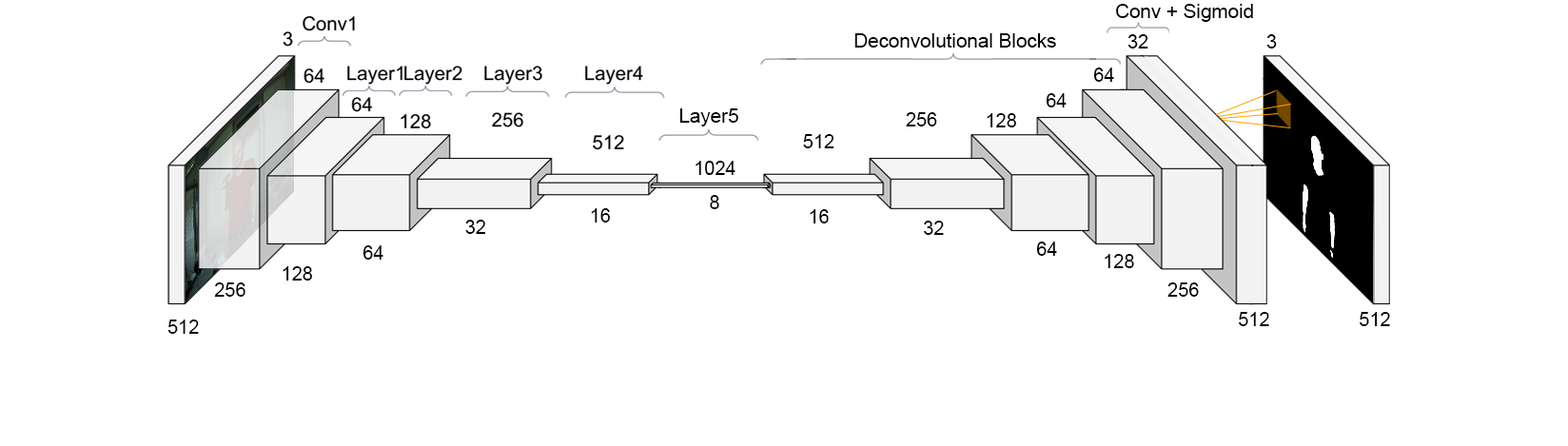
<style>
.page{position:relative;width:1568px;height:446px;background:#ffffff}
.page>*{position:absolute;margin:0}
.t1{font:19.4px "ArialMT";color:#000000}
.t2{font:19px "ArialMT";color:#000000}
.t3{font:19.3px "ArialMT";color:#000000}
.t4{font:19.1px "ArialMT";color:#000000}
</style>
<div class="page">
<p class="t1" style="left:1116px;top:4px;width:137px;height:18px">Conv + Sigmoid</p>
<p class="t1" style="left:854px;top:33px;width:202px;height:15px">Deconvolutional Blocks</p>
<p class="t2" style="left:1127px;top:34px;width:21px;height:15px">32</p>
<p class="t3" style="left:1266px;top:34px;width:11px;height:15px">3</p>
<p class="t4" style="left:1093px;top:68px;width:21px;height:14px">64</p>
<p class="t1" style="left:1046px;top:93px;width:21px;height:15px">64</p>
<p class="t3" style="left:679px;top:108px;width:59px;height:19px">Layer5</p>
<p class="t1" style="left:906px;top:112px;width:31px;height:15px">256</p>
<p class="t1" style="left:987px;top:113px;width:29px;height:14px">128</p>
<p class="t2" style="left:803px;top:134px;width:31px;height:14px">512</p>
<p class="t2" style="left:696px;top:161px;width:39px;height:14px">1024</p>
<p class="t2" style="left:710px;top:195px;width:9px;height:14px">8</p>
<p class="t2" style="left:591px;top:208px;width:19px;height:15px">16</p>
<p class="t4" style="left:810px;top:209px;width:19px;height:15px">16</p>
<p class="t2" style="left:465px;top:220px;width:20px;height:14px">32</p>
<p class="t4" style="left:924px;top:221px;width:20px;height:14px">32</p>
<p class="t2" style="left:363px;top:245px;width:20px;height:15px">64</p>
<p class="t4" style="left:1036px;top:242px;width:21px;height:14px">64</p>
<p class="t4" style="left:1105px;top:254px;width:29px;height:14px">128</p>
<p class="t2" style="left:283px;top:266px;width:29px;height:15px">128</p>
<p class="t2" style="left:214px;top:283px;width:31px;height:14px">256</p>
<p class="t4" style="left:1167px;top:283px;width:32px;height:14px">256</p>
<p class="t4" style="left:1239px;top:312px;width:30px;height:14px">512</p>
<p class="t4" style="left:1360px;top:312px;width:30px;height:14px">512</p>
<p class="t2" style="left:167px;top:320px;width:32px;height:14px">512</p>
</div>
